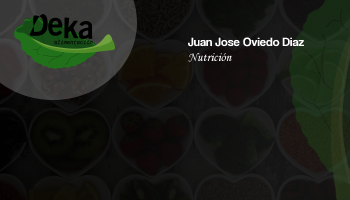
<style>
.page{position:relative;width:350px;height:200px}
.page>*{position:absolute;margin:0}
.t1{font:12.5px "CoolveticaRg-Regular";color:#ffffff}
.t2{font:12.5px "MonotypeCorsiva";color:#ffffff}
</style>
<div class="page">
<p class="t1" style="left:188px;top:37px;width:116px;height:25px">Juan Jose Oviedo Diaz<br><span class="t2">Nutrición</span></p>
</div>
